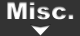
<style>
.page{position:relative;width:80px;height:36px;background:#333333}
.page>*{position:absolute;margin:0}
.t1{font:24px "Arial-Black"}
</style>
<div class="page">
<p class="t1" style="left:7px;top:1px;width:67px;height:19px">Misc..</p>
</div>
